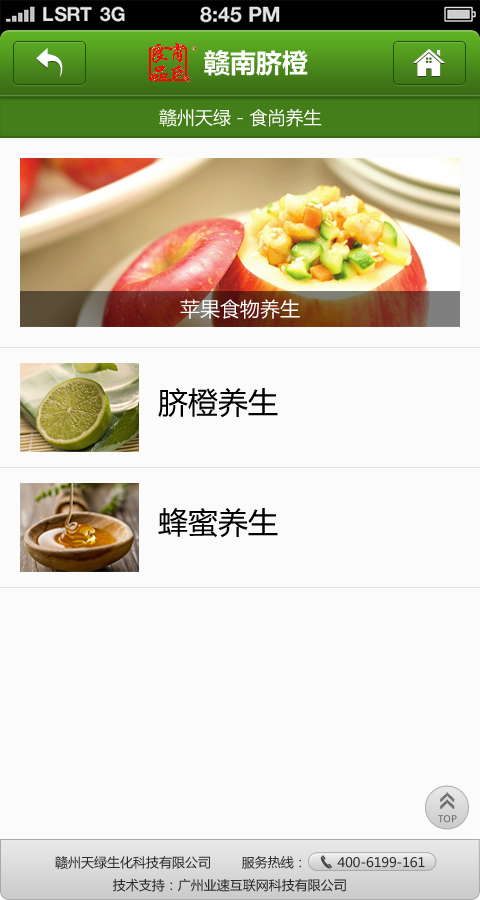
<style>
.page{position:relative;width:480px;height:900px;background:#fbfbfb}
.page>*{position:absolute;margin:0}
.t1{font:26px "MicrosoftYaHeiBold";color:#ffffff}
.t2{font:18px "MicrosoftYaHei";color:#ffffff}
.t3{font:20px "MicrosoftYaHei";color:#ffffff}
.t4{font:30px "MicrosoftYaHei";color:#000000}
.t5{font:26px "8514oem";letter-spacing:-0.2em;color:#6f6f6f;font-weight:bold}
.t6{font:9.3px "MicrosoftYaHei";color:#686868}
.t7{font:13px "MicrosoftYaHei";color:#2c2c2c}
</style>
<div class="page">
<p class="t1" style="left:204px;top:50px;width:104px;height:26px">赣南脐橙</p>
<p class="t2" style="left:159px;top:108px;width:163px;height:19px">赣州天绿 - 食尚养生</p>
<p class="t3" style="left:180px;top:299px;width:120px;height:20px">苹果食物养生</p>
<p class="t4" style="left:158px;top:388px;width:120px;height:30px">脐橙养生</p>
<p class="t4" style="left:158px;top:508px;width:120px;height:30px">蜂蜜养生</p>
<p class="t5" style="left:440px;top:792px;width:15px;height:17px;rotate:-90deg">&gt;&gt;</p>
<p class="t6" style="left:438px;top:815px;width:19px;height:8px">TOP</p>
<p class="t7" style="left:55px;top:856px;width:370px;height:36px">赣州天绿生化科技有限公司        服务热线：        400-6199-161<br>               技术支持：广州业速互联网科技有限公司</p>
</div>
